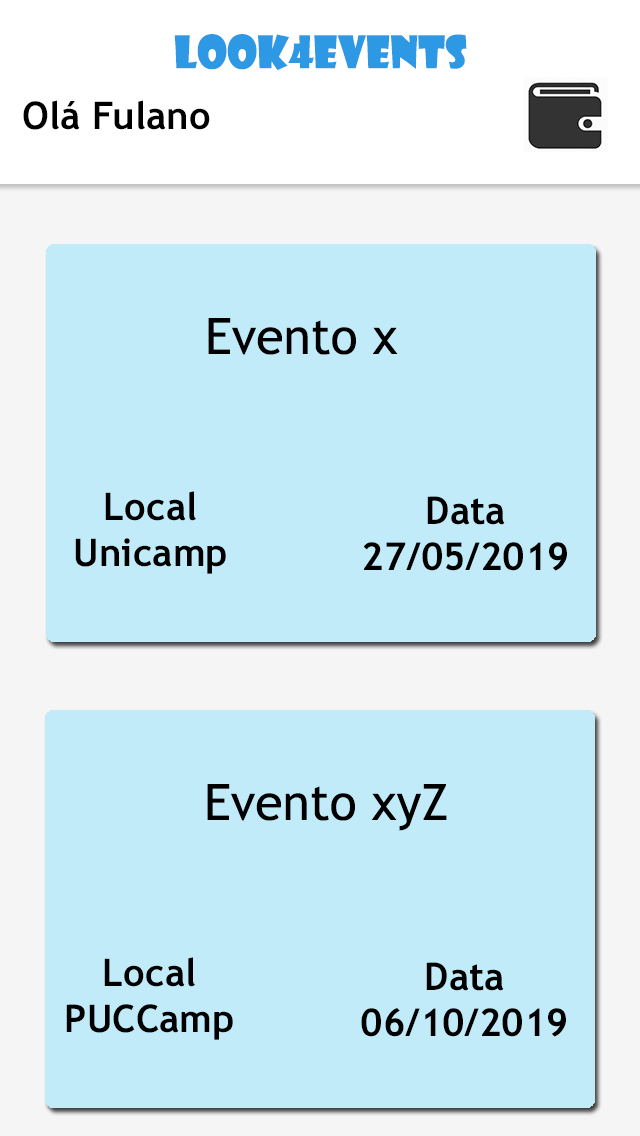
<style>
.page{position:relative;width:640px;height:1136px;background:#c2ebfa}
.page>*{position:absolute;margin:0}
.t1{font:43.6px "ShowcardGothic-Reg";color:#2d99e4}
.t2{font:38.1px "TrebuchetMS-Bold";color:#000000}
.t3{font:50px "TrebuchetMS";color:#000000}
.t4{font:38.2px "TrebuchetMS-Bold";color:#000000}
.t5{font:38.4px "TrebuchetMS-Bold";color:#000000}
</style>
<div class="page">
<p class="t1" style="left:174px;top:34px;width:293px;height:36px">look4events</p>
<p class="t2" style="left:23px;top:100px;width:187px;height:30px">Olá Fulano</p>
<p class="t3" style="left:208px;top:318px;width:190px;height:37px">Evento x</p>
<p class="t4" style="left:75px;top:491px;width:151px;height:83px;text-align:center">Local<br>Unicamp</p>
<p class="t5" style="left:363px;top:496px;width:204px;height:75px;text-align:center">Data<br>27/05/2019</p>
<p class="t3" style="left:207px;top:784px;width:240px;height:47px">Evento xyZ</p>
<p class="t4" style="left:66px;top:957px;width:167px;height:83px;text-align:center">Local<br>PUCCamp</p>
<p class="t5" style="left:361px;top:962px;width:205px;height:75px;text-align:center">Data<br>06/10/2019</p>
</div>
